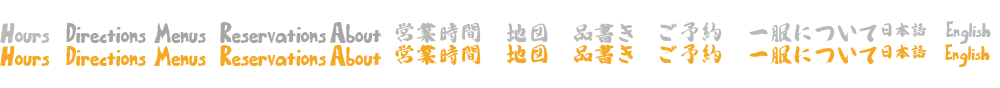
<style>
.page{position:relative;width:1000px;height:88px;background:#ffffff}
.page>*{position:absolute;margin:0}
.t1{font:22px "BumpyRoad";color:#bab9b9}
.t2{font:22px "BumpyRoad";color:#a6a5a3}
.t3{font:22px "Ataka";color:#bab9b9}
.t4{font:16px "Ataka";color:#bab9b9}
.t5{font:16px "BumpyRoad";color:#bab9b9}
.t6{font:22px "BumpyRoad";color:#f5a823}
.t7{font:22px "Ataka";color:#f5a823}
.t8{font:16px "Ataka";color:#f5a823}
.t9{font:16px "BumpyRoad";color:#f5a823}
</style>
<div class="page">
<p class="t1" style="left:0px;top:23px;width:50px;height:20px">Hours</p>
<p class="t2" style="left:66px;top:23px;width:80px;height:20px">Directions</p>
<p class="t2" style="left:154px;top:23px;width:52px;height:20px">Menus</p>
<p class="t2" style="left:220px;top:22px;width:106px;height:21px">Reservations</p>
<p class="t2" style="left:330px;top:22px;width:52px;height:21px">About</p>
<p class="t3" style="left:395px;top:22px;width:86px;height:21px">営業時間</p>
<p class="t3" style="left:507px;top:23px;width:41px;height:20px">地図</p>
<p class="t3" style="left:573px;top:23px;width:60px;height:21px">品書き</p>
<p class="t3" style="left:660px;top:22px;width:62px;height:20px">ご予約</p>
<p class="t3" style="left:749px;top:23px;width:128px;height:20px">一服について</p>
<p class="t4" style="left:881px;top:22px;width:46px;height:15px">日本語</p>
<p class="t5" style="left:946px;top:21px;width:45px;height:23px">English</p>
<p class="t6" style="left:0px;top:46px;width:50px;height:20px">Hours</p>
<p class="t6" style="left:66px;top:46px;width:80px;height:20px">Directions</p>
<p class="t6" style="left:154px;top:46px;width:52px;height:20px">Menus</p>
<p class="t6" style="left:220px;top:45px;width:106px;height:21px">Reservations</p>
<p class="t6" style="left:330px;top:45px;width:52px;height:21px">About</p>
<p class="t7" style="left:395px;top:44px;width:86px;height:21px">営業時間</p>
<p class="t7" style="left:507px;top:44px;width:41px;height:20px">地図</p>
<p class="t7" style="left:573px;top:44px;width:60px;height:21px">品書き</p>
<p class="t7" style="left:660px;top:44px;width:62px;height:20px">ご予約</p>
<p class="t7" style="left:749px;top:45px;width:128px;height:20px">一服について</p>
<p class="t8" style="left:881px;top:44px;width:46px;height:15px">日本語</p>
<p class="t9" style="left:945px;top:44px;width:45px;height:23px">English</p>
</div>
